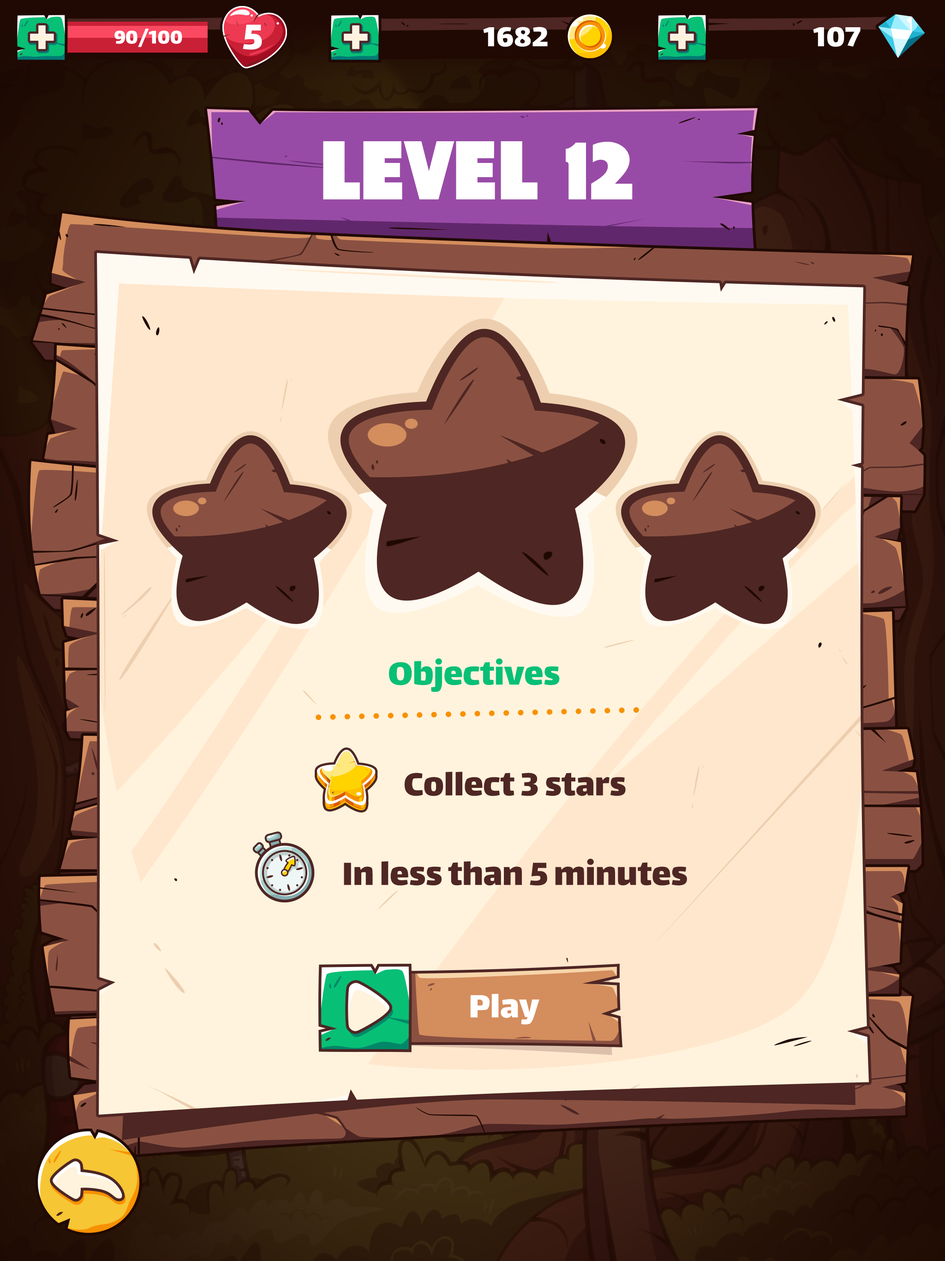
<style>
.page{position:relative;width:945px;height:1261px}
.page>*{position:absolute;margin:0}
.t1{font:57.2px "Lalezar-Regular";color:#fff3dd}
.t2{font:22.2px "Lalezar-Regular";color:#ffffff}
.t3{font:42.5px "Lalezar-Regular";color:#ffffff}
.t4{font:33.2px "Lalezar-Regular";color:#ffffff}
.t5{font:83.1px "Tondu-Beta";color:#ffffff;text-transform:uppercase}
.t6{font:38.8px "Lalezar-Regular";color:#08bf76}
.t7{font:38.8px/89.6px "Lalezar-Regular";color:#4e2623}
.t8{font:38.8px "Lalezar-Regular";color:#ffffff}
</style>
<div class="page">
<p class="t1" style="left:30px;top:25px;width:24px;height:24px">+</p>
<p class="t2" style="left:114px;top:29px;width:68px;height:18px">90/100</p>
<p class="t3" style="left:243px;top:24px;width:19px;height:26px">5</p>
<p class="t1" style="left:344px;top:25px;width:24px;height:24px">+</p>
<p class="t4" style="left:483px;top:27px;width:65px;height:20px">1682</p>
<p class="t1" style="left:670px;top:25px;width:24px;height:24px">+</p>
<p class="t4" style="left:813px;top:27px;width:48px;height:20px">107</p>
<p class="t5" style="left:323px;top:141px;width:310px;height:58px">Level 12</p>
<p class="t6" style="left:389px;top:658px;width:171px;height:34px">Objectives</p>
<p class="t7" style="left:344px;top:772px;width:343px;height:114px;text-align:center">Collect 3 stars<br>In less than 5 minutes</p>
<p class="t8" style="left:470px;top:994px;width:70px;height:31px">Play</p>
</div>
